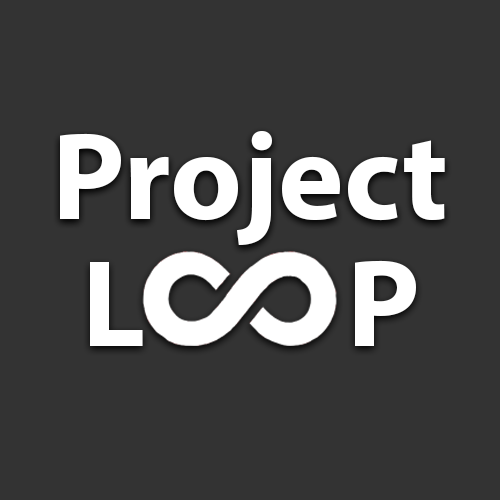
<style>
.page{position:relative;width:500px;height:500px;background:#333333}
.page>*{position:absolute;margin:0}
.t1{font:125px "MyriadPro-Bold";color:#ffffff}
</style>
<div class="page">
<p class="t1" style="left:60px;top:131px;width:385px;height:114px">Project</p>
<p class="t1" style="left:90px;top:260px;width:326px;height:86px">L        P</p>
</div>
